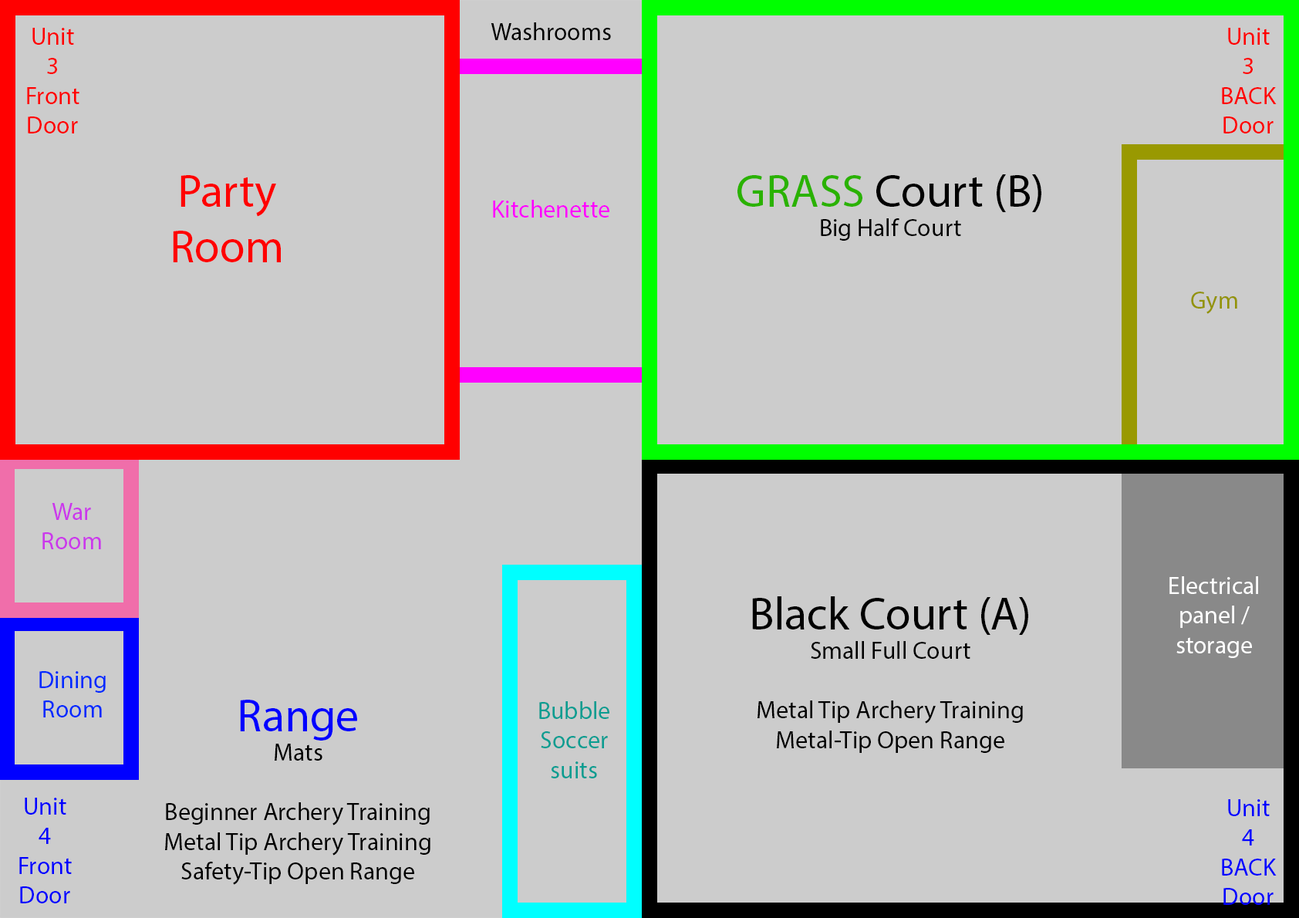
<style>
.page{position:relative;width:1299px;height:918px;background:#cccccc}
.page>*{position:absolute;margin:0}
.t1{font:24.7px "MyriadPro-Regular";color:#ff0000}
.t2{font:24.7px "MyriadPro-Regular";color:#000000}
.t3{font:46.3px "MyriadPro-Regular";color:#ff0000}
.t4{font:46.3px "MyriadPro-Regular";color:#2ab200}
.t5{font:46.3px "MyriadPro-Regular";color:#000000}
.t6{font:24.7px "MyriadPro-Regular";color:#ff00ff}
.t7{font:24.7px "MyriadPro-Regular";color:#939306}
.t8{font:24.7px "MyriadPro-Regular";color:#cb38eb}
.t9{font:24.7px "MyriadPro-Regular";color:#ffffff}
.t10{font:24.7px "MyriadPro-Regular";color:#002aff}
.t11{font:46.3px "MyriadPro-Regular";color:#0000ff}
.t12{font:24.7px "MyriadPro-Regular";color:#0a9d91}
.t13{font:24.7px "MyriadPro-Regular";color:#0000ff}
</style>
<div class="page">
<p class="t1" style="left:27px;top:28px;width:52px;height:105px;text-align:center">Unit<br>3<br>Front<br>Door</p>
<p class="t2" style="left:491px;top:22px;width:120px;height:18px">Washrooms</p>
<p class="t1" style="left:1222px;top:28px;width:55px;height:105px;text-align:center">Unit<br>3<br>BACK<br>Door</p>
<p class="t3" style="left:173px;top:175px;width:108px;height:87px;text-align:center">Party<br>Room</p>
<p class="t2" style="left:737px;top:174px;width:304px;height:67px;text-align:center"><span class="t4">GRASS</span><span class="t5"> Court (B)<br></span>Big Half Court</p>
<p class="t6" style="left:493px;top:200px;width:116px;height:18px">Kitchenette</p>
<p class="t7" style="left:1191px;top:292px;width:46px;height:22px">Gym</p>
<p class="t8" style="left:42px;top:503px;width:59px;height:46px;text-align:center">War<br>Room</p>
<p class="t9" style="left:1169px;top:576px;width:89px;height:82px;text-align:center">Electrical<br>panel /<br>storage</p>
<p class="t2" style="left:752px;top:596px;width:276px;height:157px;text-align:center"><span class="t5">Black Court (A)<br></span>Small Full Court<br><br>Metal Tip Archery Training<br>Metal-Tip Open Range</p>
<p class="t10" style="left:39px;top:671px;width:67px;height:46px;text-align:center">Dining<br>Room</p>
<p class="t2" style="left:165px;top:700px;width:265px;height:185px;text-align:center"><span class="t11">Range<br></span>Mats<br><br>Beginner Archery Training<br>Metal Tip Archery Training<br>Safety-Tip Open Range</p>
<p class="t12" style="left:539px;top:701px;width:70px;height:77px;text-align:center">Bubble<br>Soccer<br>suits</p>
<p class="t13" style="left:19px;top:798px;width:53px;height:105px;text-align:center">Unit<br>4<br>Front<br>Door</p>
<p class="t13" style="left:1222px;top:799px;width:55px;height:106px;text-align:center">Unit<br>4<br>BACK<br>Door</p>
</div>
